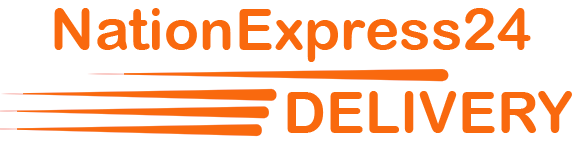
<style>
.page{position:relative;width:586px;height:148px;background:#ffffff}
.page>*{position:absolute;margin:0}
.t1{font:58.3px "ArialRoundedMTBold";color:#f9690e}
</style>
<div class="page">
<p class="t1" style="left:54px;top:8px;width:477px;height:54px">NationExpress24</p>
<p class="t1" style="left:287px;top:91px;width:285px;height:42px">DELIVERY</p>
</div>
